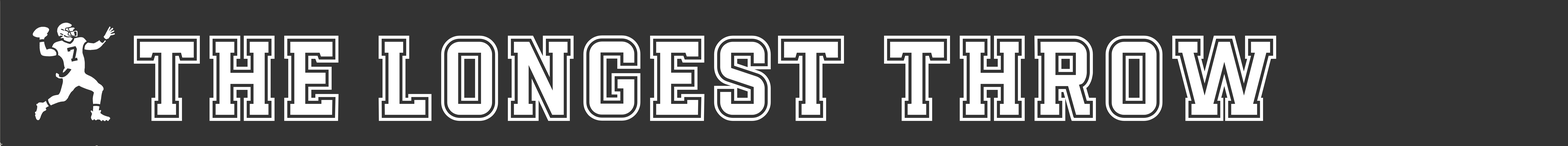
<style>
.page{position:relative;width:1568px;height:146px;background:#333333}
.page>*{position:absolute;margin:0}
.t1{font:121.5px "SportingOutline";color:#ffffff}
</style>
<div class="page">
<p class="t1" style="left:134px;top:35px;width:1142px;height:86px">THE LONGEST THROW</p>
</div>
